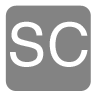
<style>
.page{position:relative;width:96px;height:96px;background:#838383}
.page>*{position:absolute;margin:0}
.t1{font:60px "Helvetica";color:#ffffff}
</style>
<div class="page">
<p class="t1" style="left:10px;top:21px;width:78px;height:46px">SC</p>
</div>
